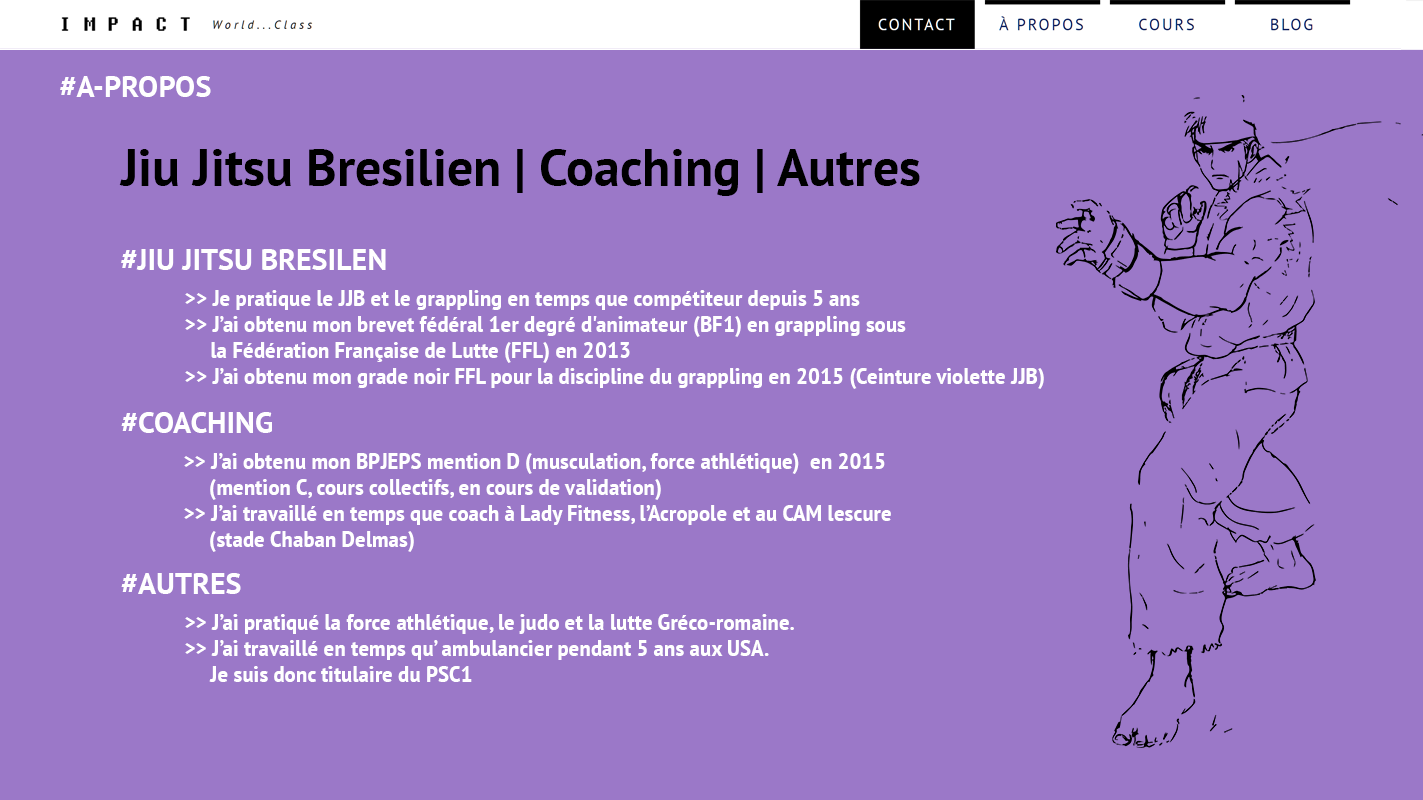
<style>
.page{position:relative;width:1423px;height:800px;background:#9b78c8}
.page>*{position:absolute;margin:0}
.t1{font:30px "PTSans-Bold";color:#ffffff}
.t2{font:52px "PTSans-Bold";color:#000000}
.t3{font:22px/13px "PTSans-NarrowBold";color:#ffffff;scale:1.15 1}
</style>
<div class="page">
<p class="t1" style="left:60px;top:76px;width:151px;height:21px">#A-PROPOS</p>
<p class="t2" style="left:119px;top:149px;width:801px;height:47px">Jiu Jitsu Bresilien | Coaching | Autres</p>
<p class="t1" style="left:121px;top:249px;width:265px;height:21px">#JIU JITSU BRESILEN</p>
<p class="t3" style="left:185px;top:290px;width:859px;height:99px">&gt;&gt; Je pratique le JJB et le grappling en temps que compétiteur depuis 5 ans<br><br>&gt;&gt; J’ai obtenu mon brevet fédéral 1er degré d'animateur (BF1) en grappling sous <br><br>     la Fédération Française de Lutte (FFL) en 2013<br> <br>&gt;&gt; J’ai obtenu mon grade noir FFL pour la discipline du grappling en 2015 (Ceinture violette JJB)</p>
<p class="t1" style="left:121px;top:412px;width:151px;height:21px">#COACHING</p>
<p class="t3" style="left:184px;top:453px;width:707px;height:99px">&gt;&gt; J’ai obtenu mon BPJEPS mention D (musculation, force athlétique)  en 2015 <br><br>     (mention C, cours collectifs, en cours de validation)<br><br>&gt;&gt; J’ai travaillé en temps que coach à Lady Fitness, l’Acropole et au CAM lescure <br><br>     (stade Chaban Delmas)</p>
<p class="t1" style="left:121px;top:573px;width:120px;height:21px">#AUTRES</p>
<p class="t3" style="left:185px;top:614px;width:609px;height:68px">&gt;&gt; J’ai pratiqué la force athlétique, le judo et la lutte Gréco-romaine.<br><br>&gt;&gt; J’ai travaillé en temps qu’ ambulancier pendant 5 ans aux USA. <br><br>     Je suis donc titulaire du PSC1</p>
</div>
